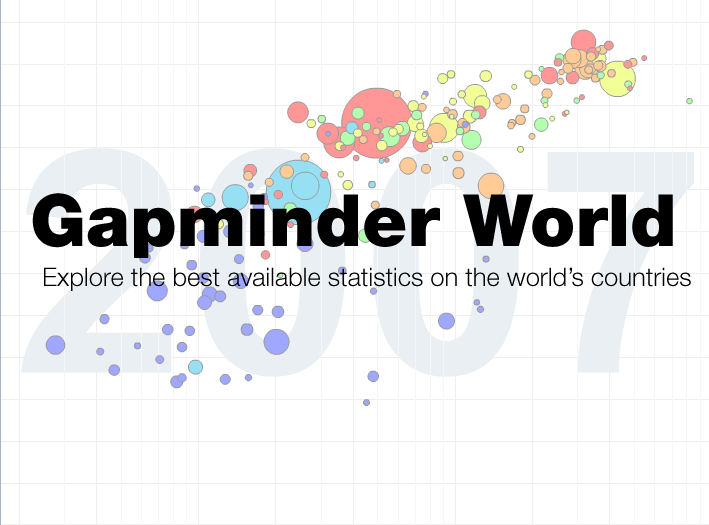
<style>
.page{position:relative;width:709px;height:525px;background:#ffffff}
.page>*{position:absolute;margin:0}
.t1{font:72px "HelveticaNeueLTStd-Blk";color:#000000}
.t2{font:25.5px "HelveticaNeueLTStd-Lt";color:#000000}
</style>
<div class="page">
<p class="t1" style="left:32px;top:193px;width:641px;height:65px">Gapminder World</p>
<p class="t2" style="left:44px;top:267px;width:647px;height:24px">Explore the best available statistics on the world’s countries</p>
</div>
